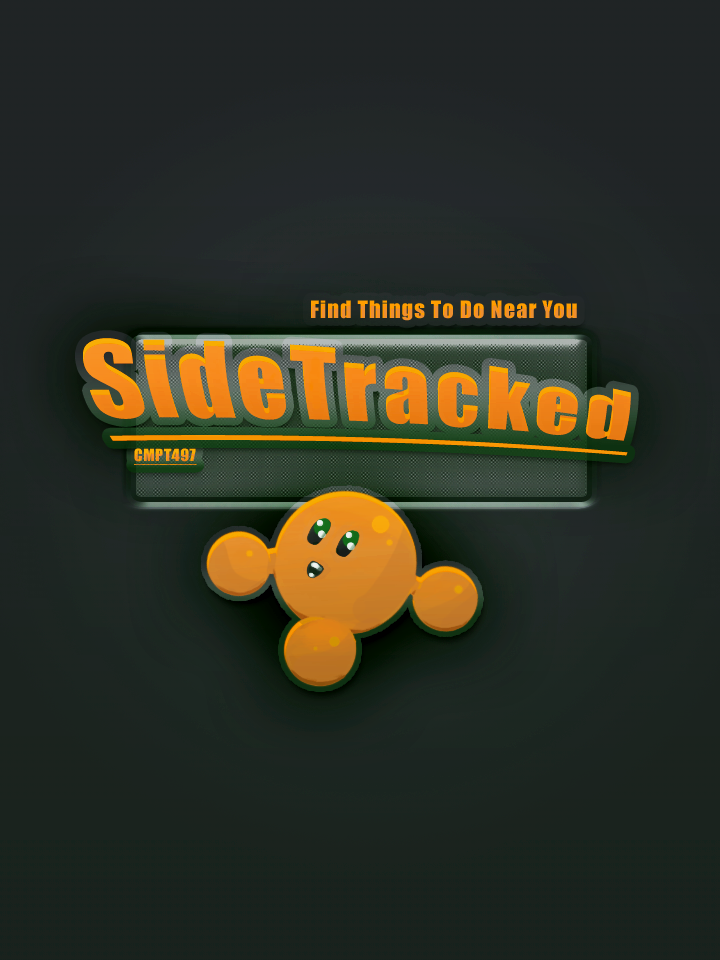
<style>
.page{position:relative;width:720px;height:960px}
.page>*{position:absolute;margin:0}
.t1{font:22.2px "Impact";letter-spacing:0.05em}
.t2{font:66.7px/8.9px "Impact";letter-spacing:0.05em;color:#ee8b21;text-decoration:underline}
.t3{font:15.6px "Impact";letter-spacing:0.05em;text-decoration:underline}
</style>
<div class="page">
<p class="t1" style="left:311px;top:300px;width:266px;height:21px">Find Things To Do Near You</p>
<p class="t2" style="left:83px;top:338px;width:548px;height:118px;text-align:justify">SideTracked</p>
<p class="t3" style="left:134px;top:448px;width:63px;height:17px">CMPT497</p>
</div>
